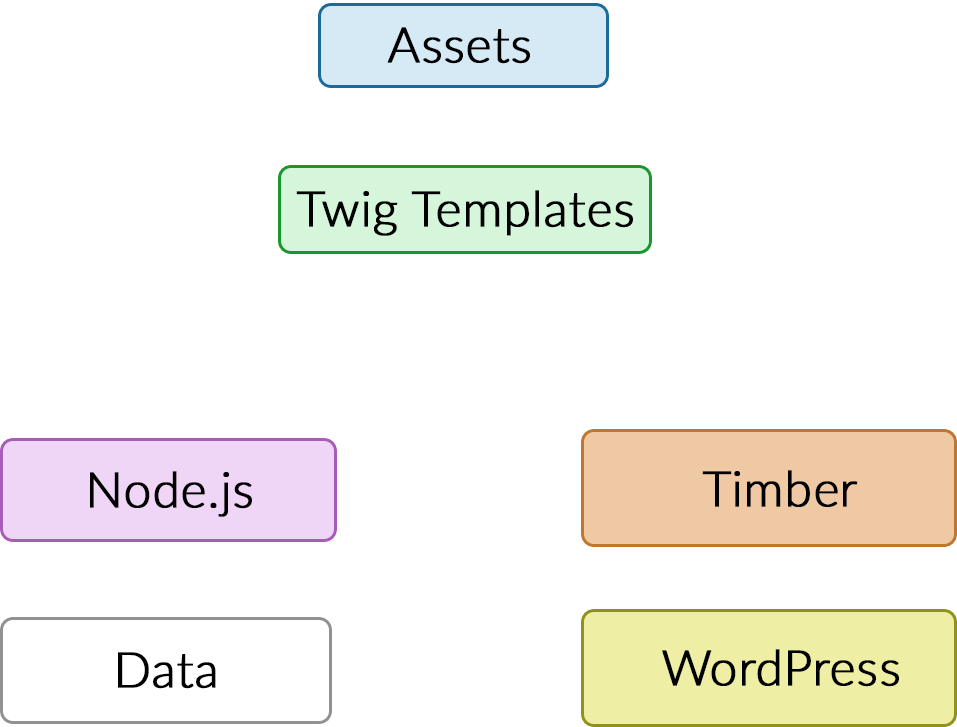
<style>
.page{position:relative;width:957px;height:727px;background:#ffffff}
.page>*{position:absolute;margin:0}
.t1{font:49px "Lato-Light";color:#000000;font-weight:bold}
</style>
<div class="page">
<p class="t1" style="left:387px;top:27px;width:143px;height:37px">Assets</p>
<p class="t1" style="left:296px;top:190px;width:337px;height:46px">Twig Templates</p>
<p class="t1" style="left:90px;top:471px;width:162px;height:46px">Node.js</p>
<p class="t1" style="left:702px;top:470px;width:156px;height:37px">Timber</p>
<p class="t1" style="left:118px;top:652px;width:98px;height:37px">Data</p>
<p class="t1" style="left:662px;top:649px;width:237px;height:38px">WordPress</p>
</div>
